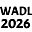
<style>
.page{position:relative;width:32px;height:32px;background:#ffffff}
.page>*{position:absolute;margin:0}
.t1{font:12px "Acme-Regular";color:#000000}
.t2{font:14px "Acme-Regular";color:#000000}
</style>
<div class="page">
<p class="t1" style="left:0px;top:6px;width:32px;height:10px">WADL</p>
<p class="t2" style="left:1px;top:18px;width:29px;height:11px">2026</p>
</div>
